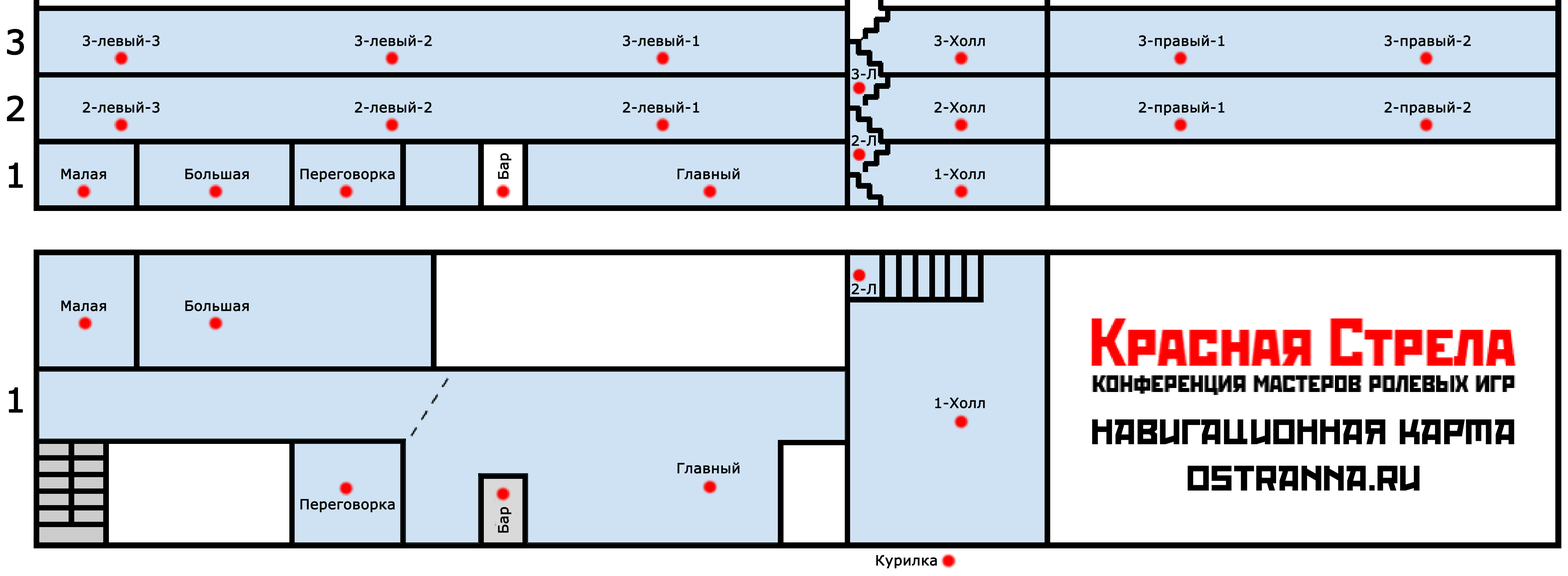
<style>
.page{position:relative;width:1568px;height:576px;background:#cfe2f3}
.page>*{position:absolute;margin:0}
.t1{font:33.3px "Verdana";color:#000000;font-weight:bold}
.t2{font:13.9px "Verdana";color:#000000;font-weight:bold}
.t3{font:31px/46.4px "RedOctober";color:#000000}
</style>
<div class="page">
<p class="t1" style="left:7px;top:29px;width:17px;height:26px">3</p>
<p class="t2" style="left:83px;top:35px;width:76px;height:11px">3-левый-3</p>
<p class="t2" style="left:355px;top:35px;width:77px;height:11px">3-левый-2</p>
<p class="t2" style="left:623px;top:35px;width:76px;height:11px">3-левый-1</p>
<p class="t2" style="left:934px;top:35px;width:51px;height:11px">3-Холл</p>
<p class="t2" style="left:1139px;top:35px;width:86px;height:14px">3-правый-1</p>
<p class="t2" style="left:1385px;top:35px;width:86px;height:14px">3-правый-2</p>
<p class="t2" style="left:852px;top:69px;width:24px;height:11px">3-Л</p>
<p class="t1" style="left:7px;top:96px;width:17px;height:26px">2</p>
<p class="t2" style="left:83px;top:102px;width:76px;height:11px">2-левый-3</p>
<p class="t2" style="left:355px;top:102px;width:77px;height:11px">2-левый-2</p>
<p class="t2" style="left:623px;top:102px;width:76px;height:11px">2-левый-1</p>
<p class="t2" style="left:934px;top:102px;width:51px;height:11px">2-Холл</p>
<p class="t2" style="left:1139px;top:102px;width:86px;height:14px">2-правый-1</p>
<p class="t2" style="left:1385px;top:102px;width:86px;height:14px">2-правый-2</p>
<p class="t2" style="left:852px;top:135px;width:24px;height:11px">2-Л</p>
<p class="t2" style="left:498px;top:153px;width:13px;height:26px;rotate:-90deg">Бар</p>
<p class="t1" style="left:9px;top:162px;width:14px;height:26px">1</p>
<p class="t2" style="left:61px;top:169px;width:45px;height:11px">Малая</p>
<p class="t2" style="left:185px;top:169px;width:64px;height:11px">Большая</p>
<p class="t2" style="left:300px;top:169px;width:95px;height:13px">Переговорка</p>
<p class="t2" style="left:677px;top:168px;width:63px;height:12px">Главный</p>
<p class="t2" style="left:935px;top:168px;width:50px;height:12px">1-Холл</p>
<p class="t2" style="left:852px;top:284px;width:24px;height:11px">2-Л</p>
<p class="t2" style="left:61px;top:301px;width:45px;height:11px">Малая</p>
<p class="t2" style="left:185px;top:301px;width:64px;height:11px">Большая</p>
<p class="t1" style="left:9px;top:388px;width:14px;height:25px">1</p>
<p class="t2" style="left:935px;top:398px;width:50px;height:11px">1-Холл</p>
<p class="t3" style="left:1092px;top:420px;width:422px;height:71px;text-align:center">НаВигационная карта<br>Ostranna.ru</p>
<p class="t2" style="left:677px;top:463px;width:63px;height:11px">Главный</p>
<p class="t2" style="left:300px;top:499px;width:95px;height:14px">Переговорка</p>
<p class="t2" style="left:498px;top:507px;width:13px;height:26px;rotate:-90deg">Бар</p>
<p class="t2" style="left:876px;top:555px;width:61px;height:14px">Курилка</p>
</div>
